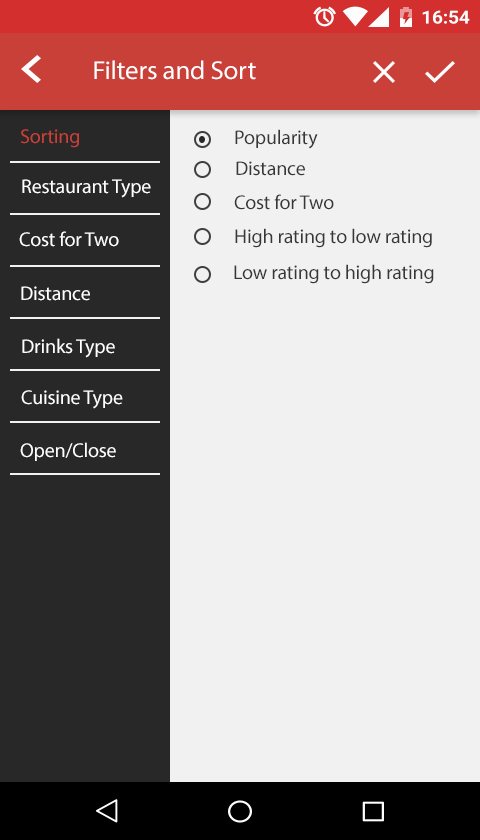
<style>
.page{position:relative;width:480px;height:840px;background:#f1f1f1}
.page>*{position:absolute;margin:0}
.t1{font:26.1px "MyriadPro-Regular";letter-spacing:-0.01em;color:#ffffff;scale:1.03 1}
.t2{font:20px "MyriadPro-Regular";letter-spacing:-0.01em;color:#c94038}
.t3{font:20px "MyriadPro-Regular";letter-spacing:-0.01em;color:#373737}
.t4{font:20px "MyriadPro-Regular";letter-spacing:-0.01em;color:#ffffff}
</style>
<div class="page">
<p class="t1" style="left:94px;top:60px;width:162px;height:20px">Filters and Sort</p>
<p class="t2" style="left:21px;top:129px;width:58px;height:19px">Sorting</p>
<p class="t3" style="left:235px;top:129px;width:83px;height:20px">Popularity</p>
<p class="t3" style="left:236px;top:161px;width:69px;height:15px">Distance</p>
<p class="t4" style="left:22px;top:179px;width:129px;height:19px">Restaurant Type</p>
<p class="t3" style="left:234px;top:194px;width:100px;height:16px">Cost for Two</p>
<p class="t4" style="left:19px;top:231px;width:100px;height:16px">Cost for Two</p>
<p class="t3" style="left:235px;top:228px;width:197px;height:20px">High rating to low rating</p>
<p class="t3" style="left:234px;top:264px;width:200px;height:20px">Low rating to high rating</p>
<p class="t4" style="left:21px;top:286px;width:69px;height:15px">Distance</p>
<p class="t4" style="left:22px;top:338px;width:93px;height:20px">Drinks Type</p>
<p class="t4" style="left:21px;top:390px;width:102px;height:19px">Cuisine Type</p>
<p class="t4" style="left:20px;top:442px;width:96px;height:19px">Open/Close</p>
</div>
